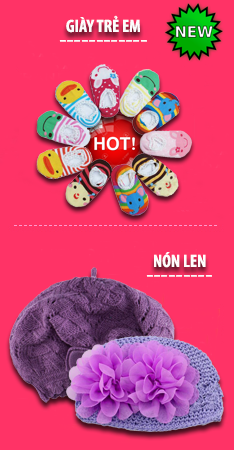
<style>
.page{position:relative;width:234px;height:450px;background:#ff3366}
.page>*{position:absolute;margin:0}
.t1{font:18px "MyriadPro-BoldCond";color:#fcfcfc}
.t2{font:24px "MyriadPro-Regular";color:#fcfcfc}
</style>
<div class="page">
<p class="t1" style="left:66px;top:15px;width:74px;height:18px">GIÀY TRẺ EM</p>
<p class="t2" style="left:59px;top:40px;width:88px;height:2px">------------</p>
<p class="t1" style="left:154px;top:252px;width:52px;height:16px">NÓN LEN</p>
<p class="t2" style="left:146px;top:275px;width:66px;height:2px">---------</p>
</div>
